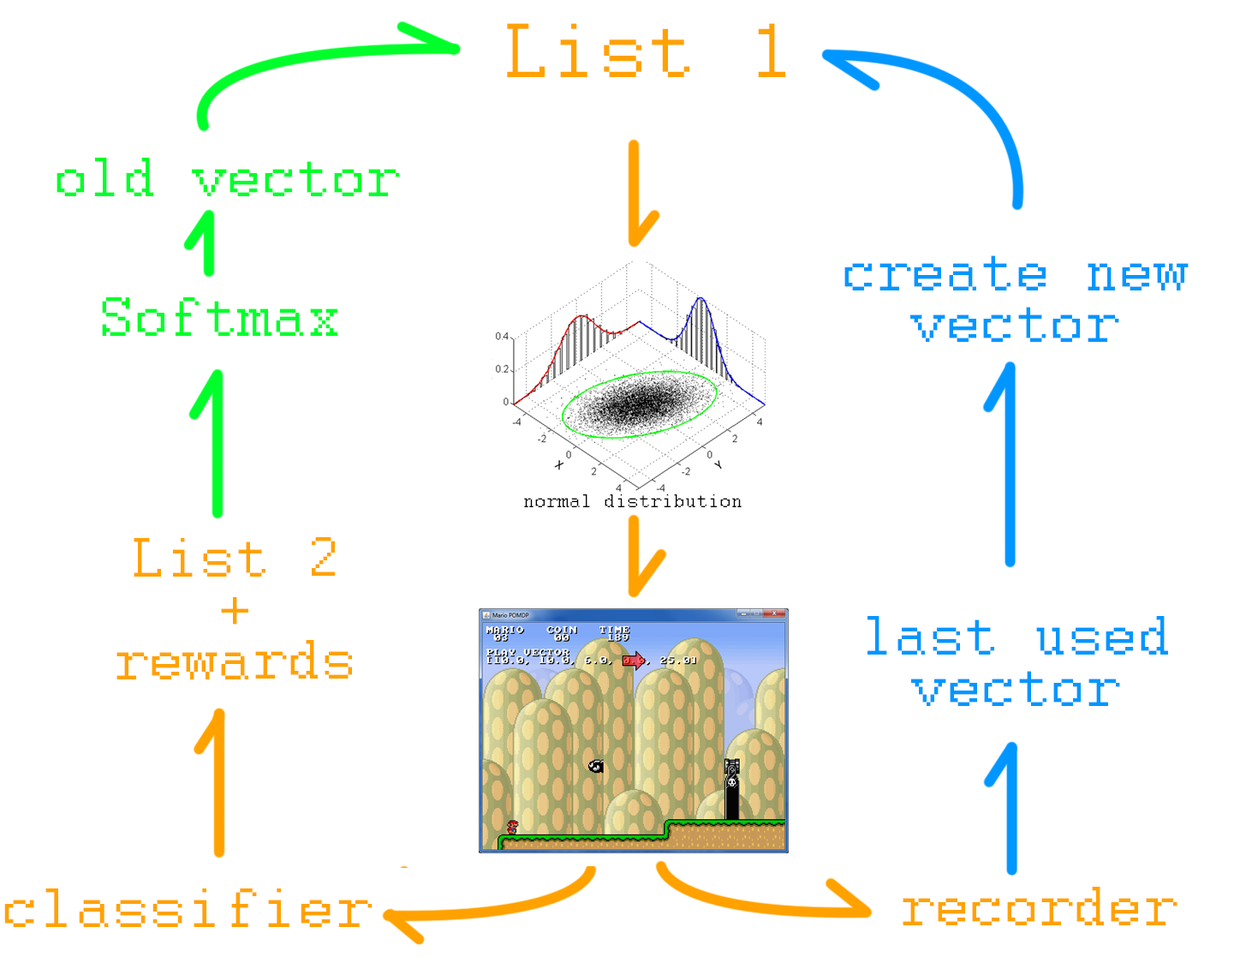
<style>
.page{position:relative;width:1246px;height:957px;background:#ffffff}
.page>*{position:absolute;margin:0}
.t1{font:85.7px "Courier";color:#ffa200}
.t2{font:61.7px "Courier";color:#00ff2a}
.t3{font:61.7px "Courier";color:#0096ff}
.t4{font:20.6px "Courier";color:#000000}
.t5{font:61.7px/51.4px "Courier";color:#ffa200}
.t6{font:61.7px "Courier";color:#ffa200;scale:1.07 1}
.t7{font:61.7px "Courier";color:#ffa200}
</style>
<div class="page">
<p class="t1" style="left:507px;top:23px;width:278px;height:54px">List 1</p>
<p class="t2" style="left:57px;top:158px;width:343px;height:38px">old vector</p>
<p class="t3" style="left:845px;top:255px;width:344px;height:87px">create new vector</p>
<p class="t2" style="left:102px;top:297px;width:235px;height:39px">Softmax</p>
<p class="t4" style="left:524px;top:494px;width:218px;height:13px">normal distribution</p>
<p class="t5" style="left:116px;top:537px;width:236px;height:142px;text-align:center">List 2<br>+<br>rewards</p>
<p class="t3" style="left:868px;top:616px;width:300px;height:90px">last used vector</p>
<p class="t6" style="left:4px;top:888px;width:369px;height:39px">classifier</p>
<p class="t7" style="left:903px;top:887px;width:275px;height:38px">recorder</p>
</div>
